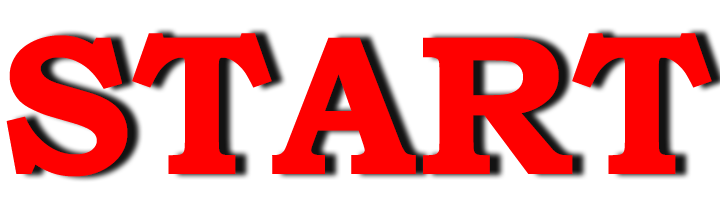
<style>
.page{position:relative;width:720px;height:200px;background:#ffffff}
.page>*{position:absolute;margin:0}
.t1{font:200px "BookmanOldStyle-Bold";color:#ff0000}
</style>
<div class="page">
<p class="t1" style="left:6px;top:33px;width:706px;height:144px">START</p>
</div>
